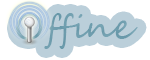
<style>
.page{position:relative;width:150px;height:60px;background:#ffffff}
.page>*{position:absolute;margin:0}
.t1{font:36px "SegoeScript";color:#71a0b0}
.t2{font:36px "LithosPro-Regular";color:#71a0b0}
</style>
<div class="page">
<p class="t1" style="left:16px;top:13px;width:122px;height:36px"><span class="t2">O</span>ffine</p>
</div>
